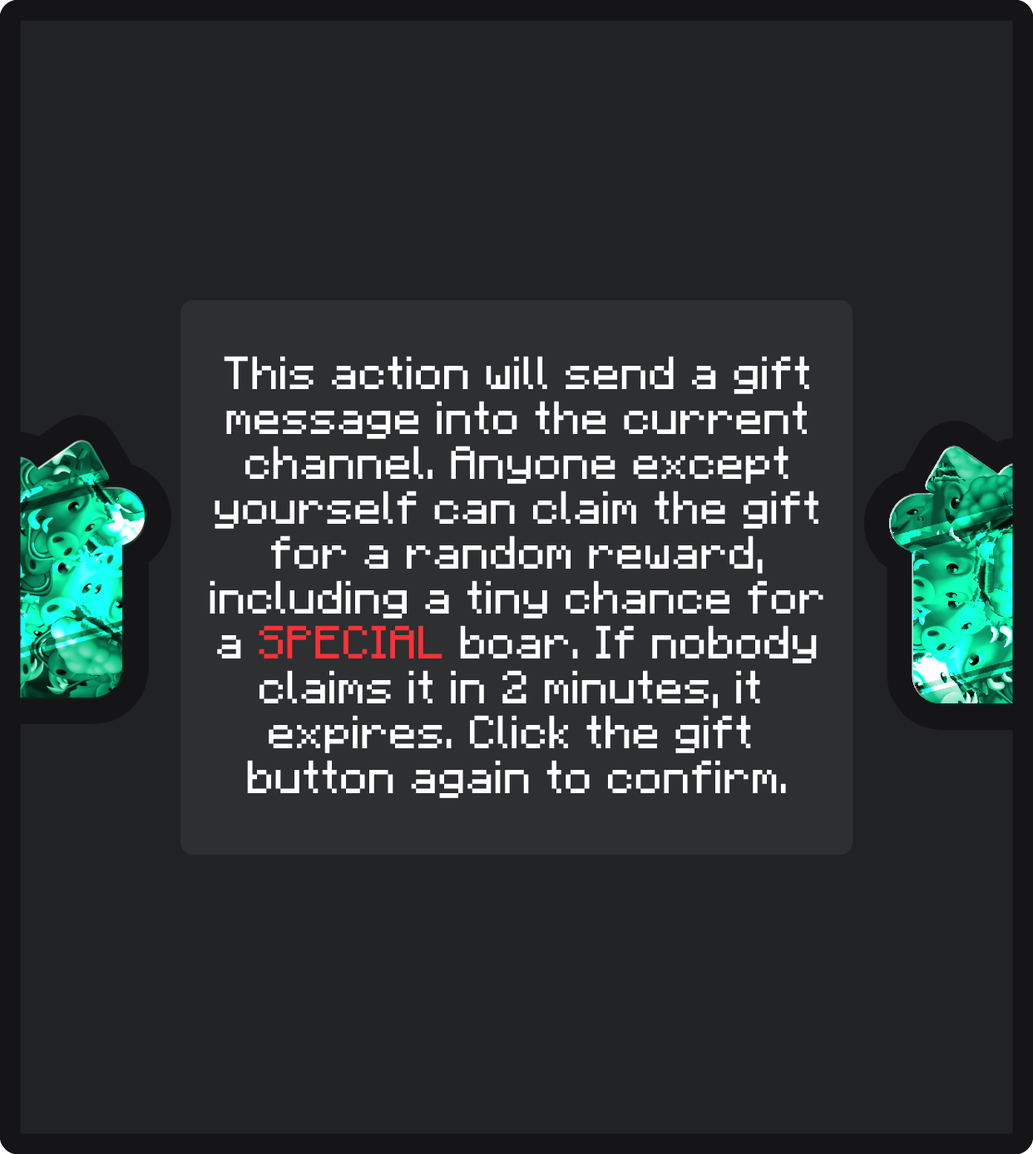
<style>
.page{position:relative;width:1033px;height:1154px;background:#212224}
.page>*{position:absolute;margin:0}
.t1{font:37.4px "F77-Minecraft";color:#ffffff}
.t2{font:37.4px "F77-Minecraft";color:#ff3136}
</style>
<div class="page">
<p class="t1" style="left:210px;top:356px;width:613px;height:442px;text-align:center">This action will send a gift<br>message into the current<br>channel. Anyone except<br>yourself can claim the gift<br>for a random reward,<br>including a tiny chance for<br>a <span class="t2">SPECIAL</span> boar. If nobody<br>claims it in 2 minutes, it <br>expires. Click the gift <br>button again to confirm.</p>
</div>
